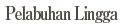
<style>
.page{position:relative;width:121px;height:27px;background:#ffffff}
.page>*{position:absolute;margin:0}
.t1{font:18px "RyuminPro-ExBold";letter-spacing:-0.08em;color:#4c4843;scale:0.85 1}
</style>
<div class="page">
<p class="t1" style="left:5px;top:6px;width:114px;height:17px">Pelabuhan Lingga</p>
</div>
